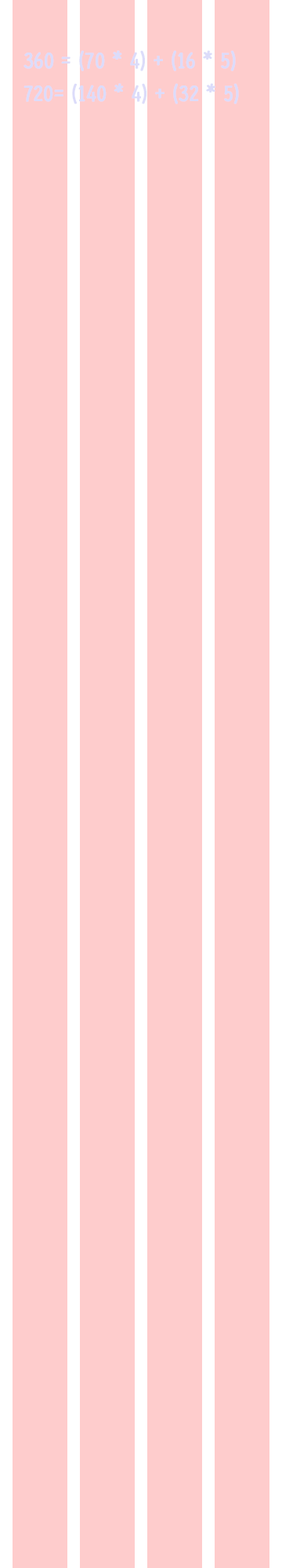
<style>
.page{position:relative;width:282px;height:1568px;background:#fecccc}
.page>*{position:absolute;margin:0}
.t1{font:23.5px "KoreanEMPJ-B";letter-spacing:-0.05em;color:#dcdcfa;font-weight:bold}
</style>
<div class="page">
<p class="t1" style="left:24px;top:50px;width:212px;height:21px">360 = (70 * 4) + (16 * 5)</p>
<p class="t1" style="left:24px;top:83px;width:215px;height:21px">720= (140 * 4) + (32 * 5)</p>
</div>
